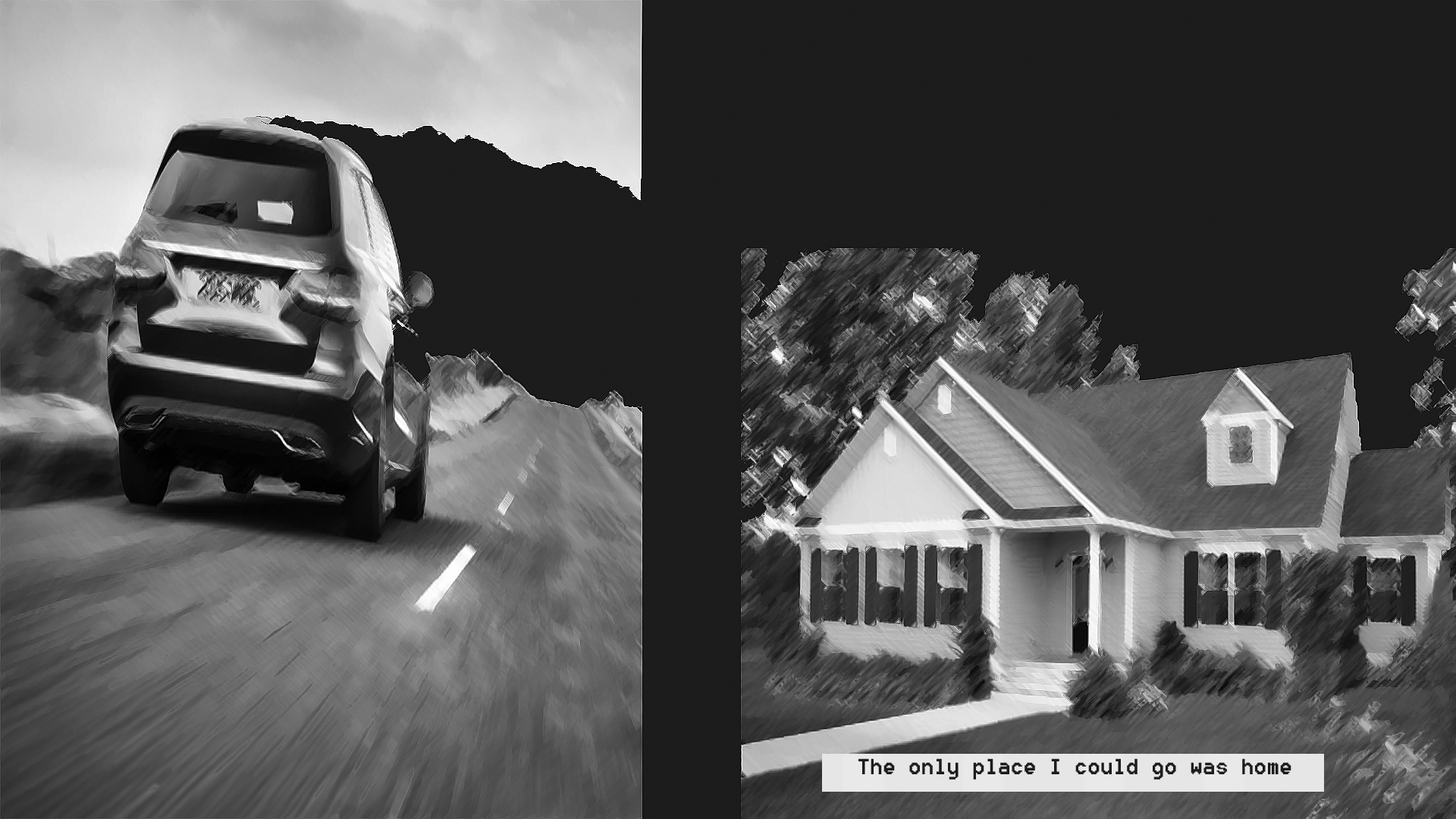
<style>
.page{position:relative;width:1456px;height:819px;background:#1c1c1c}
.page>*{position:absolute;margin:0}
.t1{font:27.3px "8514oem";color:#1c1c1c}
</style>
<div class="page">
<p class="t1" style="left:858px;top:758px;width:433px;height:22px">The only place I could go was home</p>
</div>
